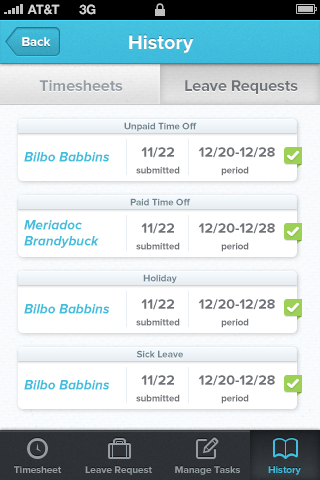
<style>
.page{position:relative;width:320px;height:480px;background:#ffffff}
.page>*{position:absolute;margin:0}
.t1{font:13px "HelveticaNeue-Bold";color:#d4d4d4;text-transform:uppercase}
.t2{font:13px "ProximaNova-Bold";color:#ffffff}
.t3{font:20px "ProximaNova-Bold";color:#ffffff}
.t4{font:16px "ProximaNova-Bold";color:#959ca3}
.t5{font:16px "ProximaNova-Bold";color:#6f7276}
.t6{font:10px "ProximaNova-Bold";color:#6e8590;scale:0.97 1}
.t7{font:14px "ProximaNova-Bold";color:#6f7276}
.t8{font:14px "ProximaNova-BoldIt";color:#41bedd;scale:0.97 1}
.t9{font:10px "ProximaNova-Bold";color:#6f7276;scale:0.95 1}
.t10{font:14px/16px "ProximaNova-BoldIt";color:#41bedd;scale:0.97 1}
.t11{font:10px "ProximaNova-Bold";color:#959ca3}
.t12{font:10px "ProximaNova-Bold";color:#41bedd}
</style>
<div class="page">
<p class="t1" style="left:27px;top:4px;width:33px;height:11px">AT&amp;t</p>
<p class="t1" style="left:79px;top:4px;width:17px;height:11px">3G</p>
<p class="t2" style="left:22px;top:37px;width:29px;height:9px">Back</p>
<p class="t3" style="left:129px;top:35px;width:65px;height:18px">History</p>
<p class="t4" style="left:39px;top:80px;width:84px;height:11px">Timesheets</p>
<p class="t5" style="left:185px;top:80px;width:113px;height:14px">Leave Requests</p>
<p class="t6" style="left:124px;top:122px;width:73px;height:10px">Unpaid Time Off</p>
<p class="t7" style="left:141px;top:147px;width:33px;height:11px">11/22</p>
<p class="t7" style="left:198px;top:147px;width:77px;height:11px">12/20-12/28</p>
<p class="t8" style="left:24px;top:152px;width:86px;height:10px">Bilbo Babbins</p>
<p class="t9" style="left:136px;top:166px;width:44px;height:8px">submitted</p>
<p class="t9" style="left:221px;top:166px;width:28px;height:10px">period</p>
<p class="t6" style="left:130px;top:198px;width:61px;height:8px">Paid Time Off</p>
<p class="t10" style="left:24px;top:220px;width:75px;height:28px">Meriadoc<br>Brandybuck</p>
<p class="t7" style="left:141px;top:223px;width:33px;height:11px">11/22</p>
<p class="t7" style="left:198px;top:223px;width:77px;height:11px">12/20-12/28</p>
<p class="t9" style="left:136px;top:242px;width:44px;height:8px">submitted</p>
<p class="t9" style="left:221px;top:242px;width:28px;height:10px">period</p>
<p class="t6" style="left:143px;top:274px;width:34px;height:10px">Holiday</p>
<p class="t8" style="left:24px;top:304px;width:86px;height:10px">Bilbo Babbins</p>
<p class="t7" style="left:141px;top:299px;width:33px;height:11px">11/22</p>
<p class="t7" style="left:198px;top:299px;width:77px;height:11px">12/20-12/28</p>
<p class="t9" style="left:136px;top:318px;width:44px;height:8px">submitted</p>
<p class="t9" style="left:221px;top:318px;width:28px;height:10px">period</p>
<p class="t6" style="left:136px;top:350px;width:47px;height:8px">Sick Leave</p>
<p class="t7" style="left:141px;top:375px;width:33px;height:11px">11/22</p>
<p class="t7" style="left:198px;top:375px;width:77px;height:11px">12/20-12/28</p>
<p class="t8" style="left:24px;top:380px;width:86px;height:10px">Bilbo Babbins</p>
<p class="t9" style="left:136px;top:394px;width:44px;height:8px">submitted</p>
<p class="t9" style="left:221px;top:394px;width:28px;height:10px">period</p>
<p class="t11" style="left:14px;top:466px;width:48px;height:7px">Timesheet</p>
<p class="t11" style="left:85px;top:466px;width:67px;height:9px">Leave Request</p>
<p class="t11" style="left:175px;top:466px;width:65px;height:9px">Manage Tasks</p>
<p class="t12" style="left:268px;top:466px;width:33px;height:9px">History</p>
<p class="t12" style="left:268px;top:466px;width:33px;height:9px">History</p>
</div>
